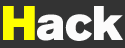
<style>
.page{position:relative;width:125px;height:48px;background:#333333}
.page>*{position:absolute;margin:0}
.t1{font:48px "AkzidenzGroteskBQ-Super";letter-spacing:-0.015em;color:#fcfbfb}
.t2{font:48px "AkzidenzGroteskBQ-Super";letter-spacing:-0.015em;color:#ffff00}
</style>
<div class="page">
<p class="t1" style="left:3px;top:6px;width:120px;height:35px"><span class="t2">H</span>ack</p>
</div>
